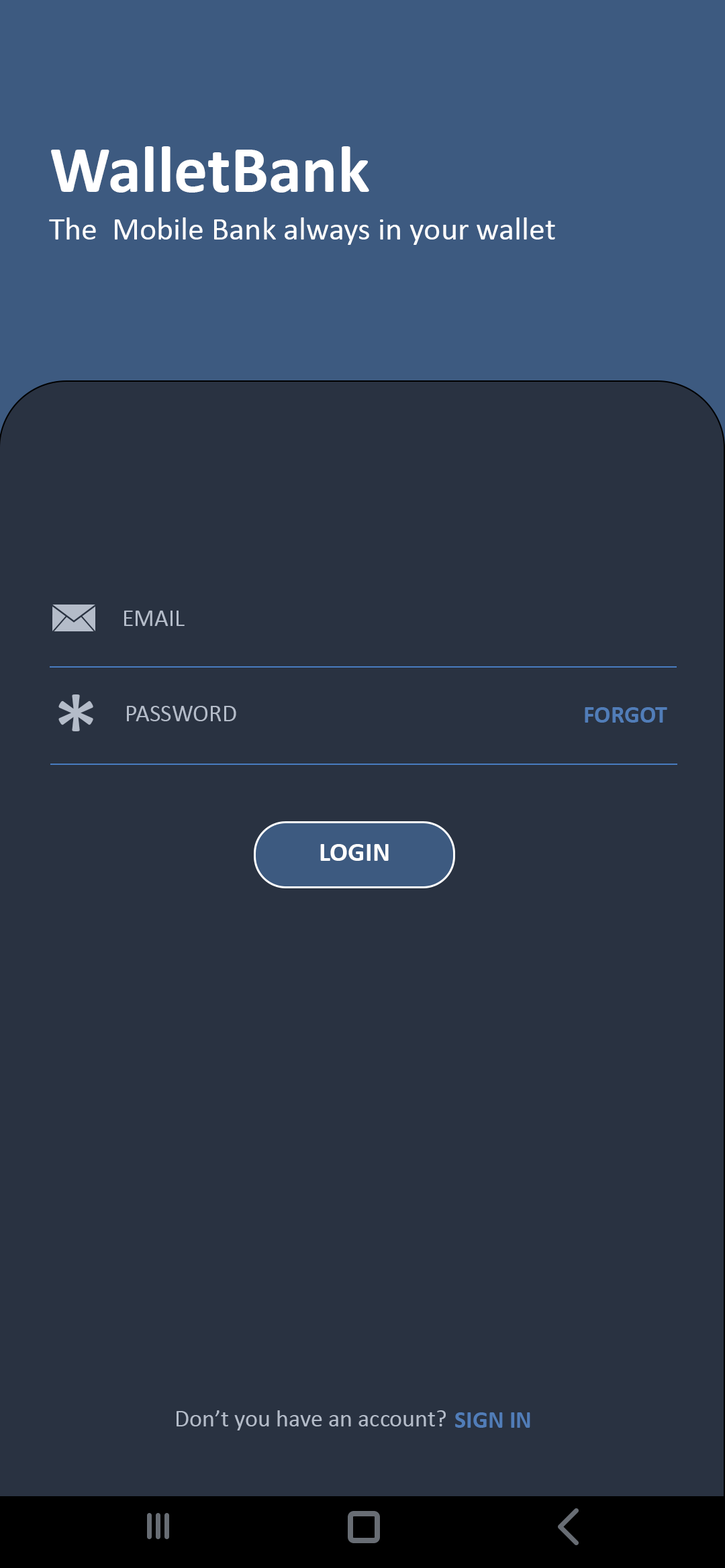
<style>
.page{position:relative;width:725px;height:1568px;background:#293241}
.page>*{position:absolute;margin:0}
.t1{font:67.1px "Calibri-Bold";color:#ffffff}
.t2{font:32.2px "Calibri";color:#ffffff}
.t3{font:24.2px "Calibri";color:#b4bcc9}
.t4{font:100.6px "Calibri";color:#b4bcc9}
.t5{font:24.2px "Calibri-Bold";color:#517db8}
.t6{font:26.8px "Calibri-Bold";color:#ffffff}
</style>
<div class="page">
<p class="t1" style="left:51px;top:146px;width:318px;height:47px">WalletBank</p>
<p class="t2" style="left:49px;top:217px;width:506px;height:28px">The  Mobile Bank always in your wallet</p>
<p class="t3" style="left:124px;top:611px;width:61px;height:15px">EMAIL</p>
<p class="t4" style="left:58px;top:694px;width:35px;height:37px">*</p>
<p class="t3" style="left:127px;top:706px;width:109px;height:15px">PASSWORD</p>
<p class="t5" style="left:584px;top:707px;width:83px;height:16px">FORGOT</p>
<p class="t6" style="left:320px;top:844px;width:68px;height:17px">LOGIN</p>
<p class="t3" style="left:176px;top:1410px;width:270px;height:20px">Don’t you have an account?</p>
<p class="t5" style="left:455px;top:1412px;width:75px;height:16px">SIGN IN</p>
</div>
